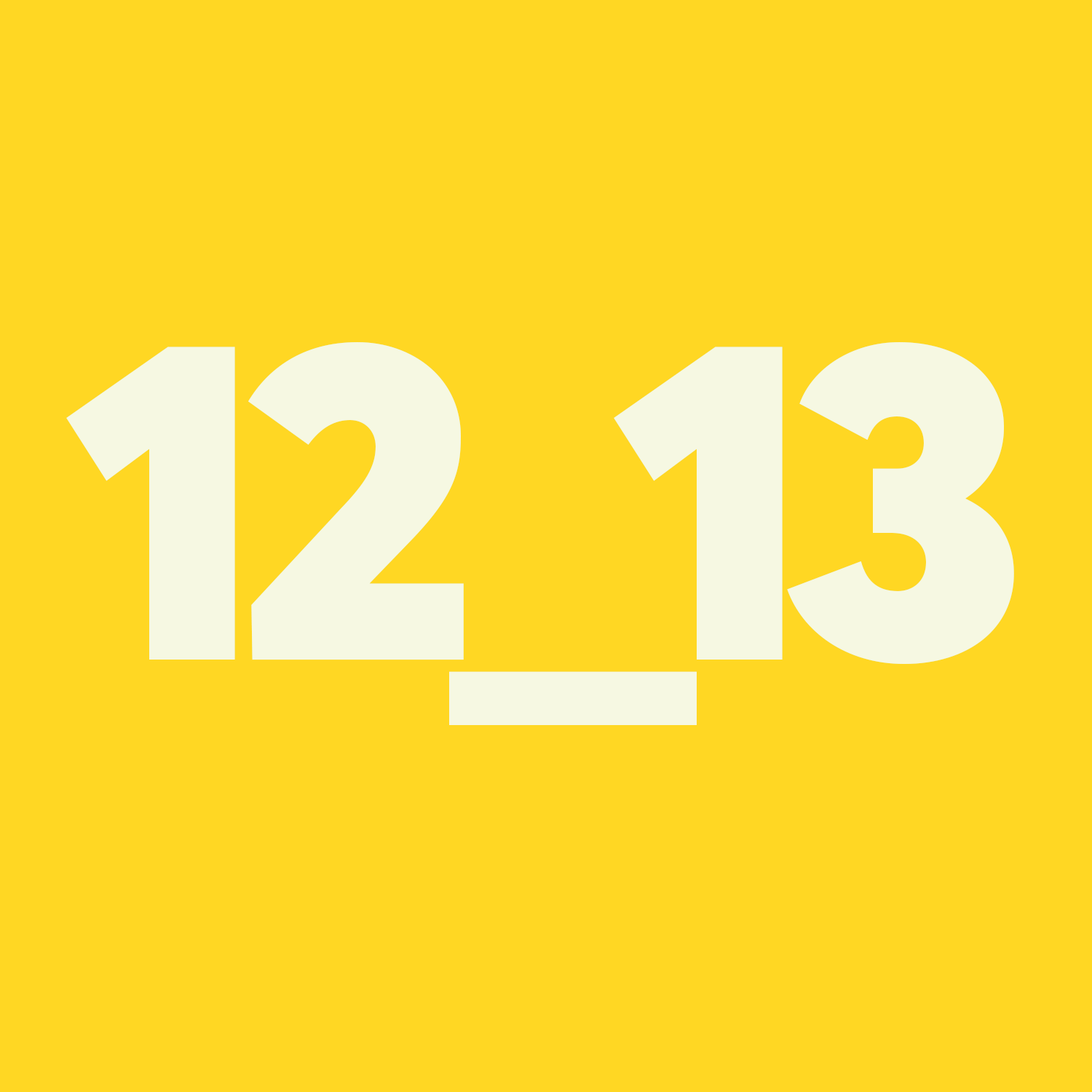
<style>
.page{position:relative;width:1092px;height:1092px;background:#ffd723}
.page>*{position:absolute;margin:0}
.t1{font:455px "AvertaStd-Black";letter-spacing:-0.05em;color:#f6f8e2}
</style>
<div class="page">
<p class="t1" style="left:66px;top:342px;width:948px;height:383px">12_13</p>
<p class="t1" style="left:66px;top:342px;width:948px;height:383px">12_13</p>
</div>
